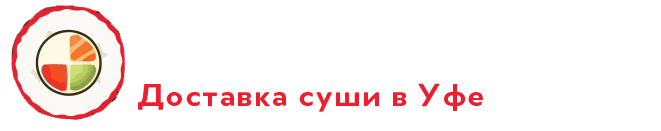
<style>
.page{position:relative;width:661px;height:131px;background:#ffffff}
.page>*{position:absolute;margin:0}
.t1{font:33.9px "Merel-Bold";letter-spacing:0.02em;color:#ed1f2e;scale:1.04 1}
</style>
<div class="page">
<p class="t1" style="left:138px;top:83px;width:345px;height:29px">Доставка суши в Уфе</p>
</div>
